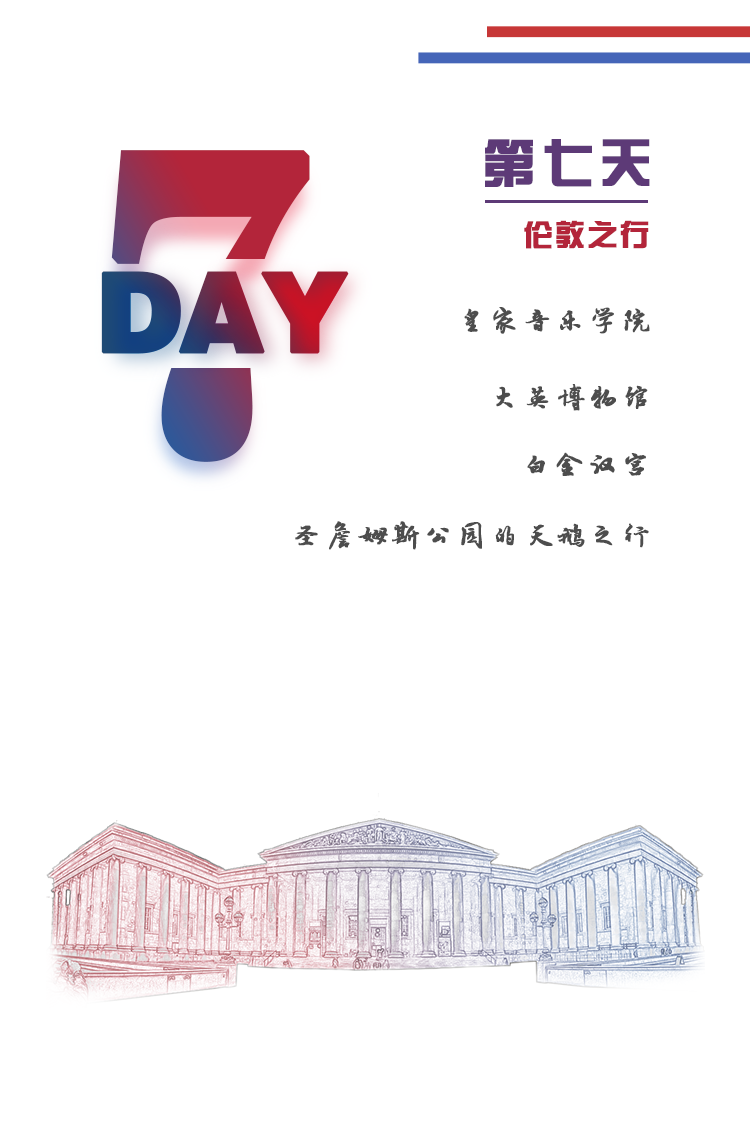
<style>
.page{position:relative;width:750px;height:1140px;background:#ffffff}
.page>*{position:absolute;margin:0}
.t1{font:432.9px "News706BT-BoldC";letter-spacing:-0.05em;font-weight:bold}
.t2{font:52px "FZZYJW--GB1-0";letter-spacing:0.1em;color:#5d3a77;font-weight:bold}
.t3{font:30px "FZZYJW--GB1-0";letter-spacing:0.05em;color:#b3253a;font-weight:bold}
.t4{font:110px "FZCCHJW--GB1-0";letter-spacing:-0.05em;font-weight:bold}
.t5{font:30px "·½ÕýÂÀ½¨µÂ×ÖÌå";letter-spacing:0.075em;color:#4d4d4d;font-weight:bold}
</style>
<div class="page">
<p class="t1" style="left:111px;top:150px;width:199px;height:312px">7</p>
<p class="t2" style="left:485px;top:139px;width:165px;height:48px">第七天</p>
<p class="t3" style="left:524px;top:220px;width:125px;height:29px">伦敦之行</p>
<p class="t4" style="left:101px;top:271px;width:248px;height:83px">DAY</p>
<p class="t5" style="left:464px;top:307px;width:186px;height:27px">皇家音乐学院</p>
<p class="t5" style="left:496px;top:384px;width:152px;height:27px">大英博物馆</p>
<p class="t5" style="left:527px;top:452px;width:119px;height:24px">白金汉宫</p>
<p class="t5" style="left:295px;top:521px;width:354px;height:29px">圣詹姆斯公园的天鹅之行</p>
</div>
